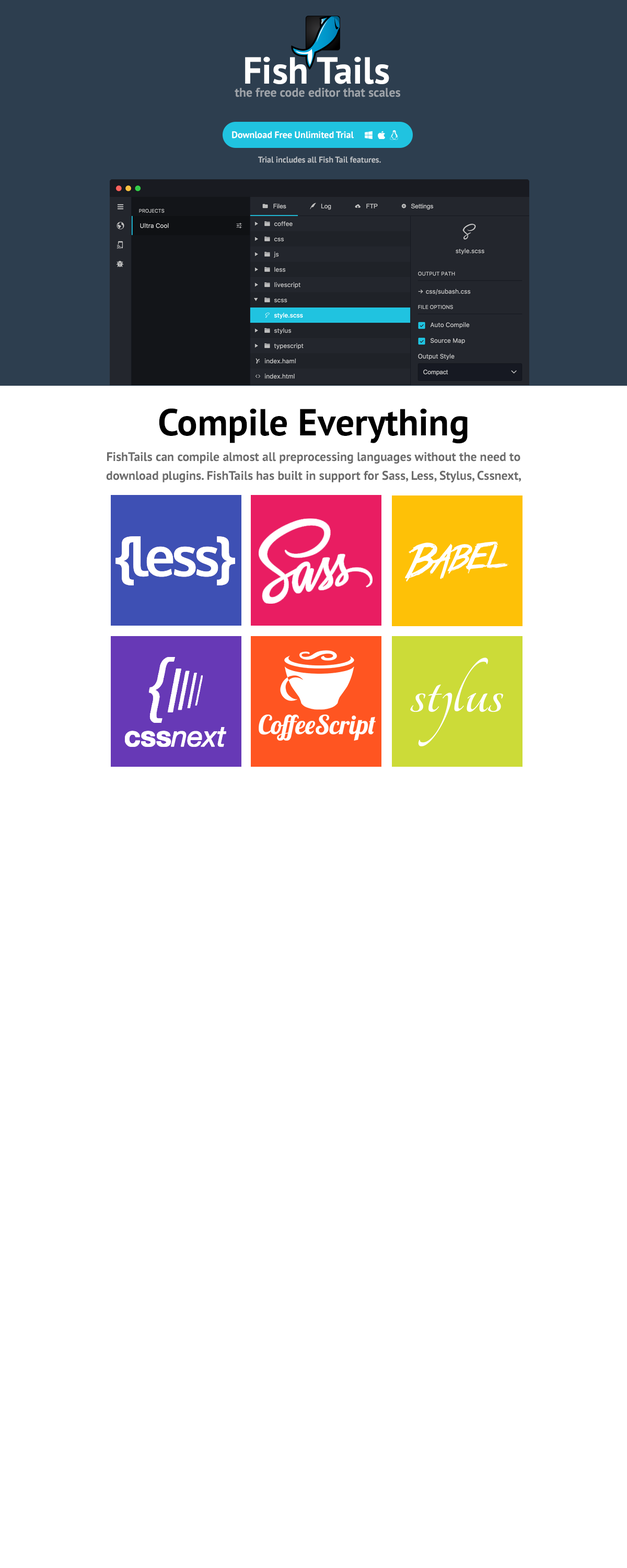
<style>
.page{position:relative;width:627px;height:1568px;background:#ffffff}
.page>*{position:absolute;margin:0}
.t1{font:37.6px "PTSans-Bold";color:#ffffff}
.t2{font:12.5px "PTSans-Bold";color:#9ea3a9}
.t3{font:9.4px "PTSans-Bold";color:#ffffff}
.t4{font:8.4px "PTSans-Bold";color:#babec2}
.t5{font:37.6px "PTSans-Bold";color:#000000}
.t6{font:12.5px/18.8px "PTSans-Bold";color:#6b6b6b}
</style>
<div class="page">
<p class="t1" style="left:245px;top:56px;width:144px;height:28px">Fish Tails</p>
<p class="t2" style="left:235px;top:88px;width:165px;height:9px">the free code editor that scales</p>
<p class="t3" style="left:232px;top:131px;width:122px;height:8px">Download Free Unlimited Trial</p>
<p class="t4" style="left:258px;top:156px;width:123px;height:7px">Trial includes all Fish Tail features.</p>
<p class="t5" style="left:159px;top:408px;width:309px;height:36px">Compile Everything</p>
<p class="t6" style="left:106px;top:452px;width:415px;height:30px;text-align:center">FishTails can compile almost all preprocessing languages without the need to download plugins. FishTails has built in support for Sass, Less, Stylus, Cssnext, Jade, Markdown, Slim, Coffeescript etc.</p>
</div>
